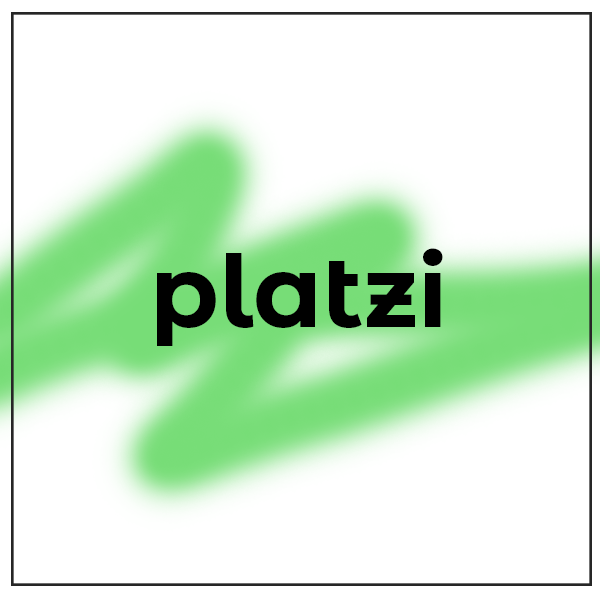
<style>
.page{position:relative;width:600px;height:600px;background:#ffffff}
.page>*{position:absolute;margin:0}
.t1{font:100px "MontserratAlternates-Bold";color:#000000}
</style>
<div class="page">
<p class="t1" style="left:157px;top:248px;width:286px;height:98px">platzi</p>
</div>
